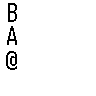
<style>
.page{position:relative;width:96px;height:96px;background:#ffffff}
.page>*{position:absolute;margin:0}
.t1{font:24px "EssentialPragmataPro";color:#000000}
</style>
<div class="page">
<p class="t1" style="left:8px;top:3px;width:9px;height:19px">B</p>
<p class="t1" style="left:7px;top:26px;width:10px;height:19px">A</p>
<p class="t1" style="left:6px;top:51px;width:11px;height:19px">@</p>
</div>
